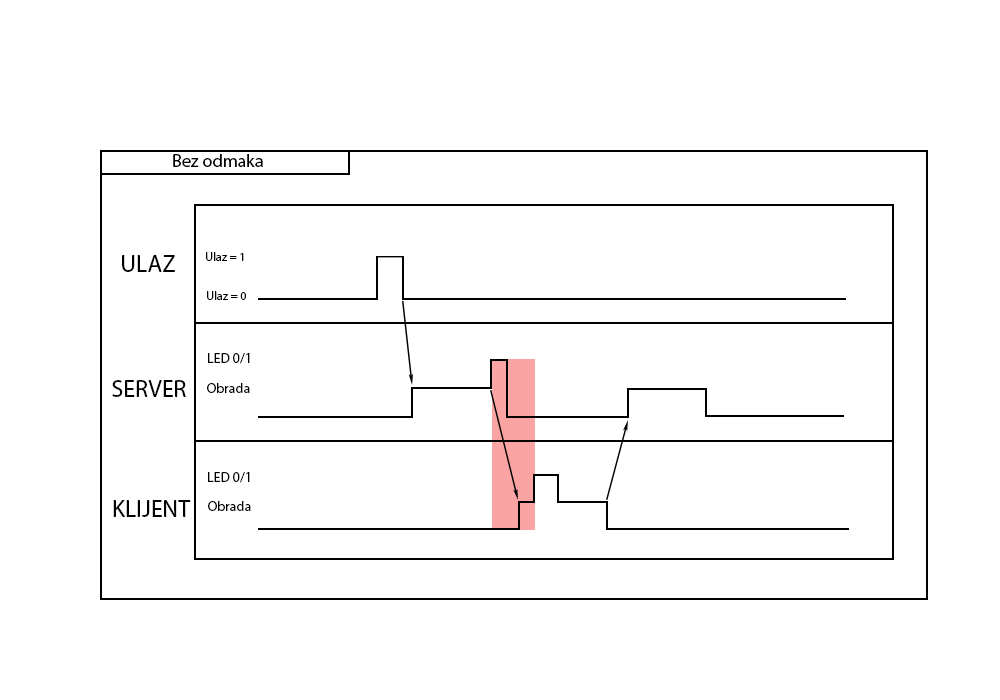
<style>
.page{position:relative;width:1000px;height:700px;background:#ffffff}
.page>*{position:absolute;margin:0}
.t1{font:18px "MyriadPro-Regular";color:#000000}
.t2{font:24px "MyriadPro-Regular";color:#000000}
.t3{font:12px "MyriadPro-Regular";color:#000000}
.t4{font:14px "MyriadPro-Regular";color:#000000}
</style>
<div class="page">
<p class="t1" style="left:173px;top:154px;width:90px;height:13px">Bez odmaka</p>
<p class="t2" style="left:122px;top:255px;width:53px;height:17px">ULAZ</p>
<p class="t3" style="left:206px;top:252px;width:38px;height:9px">Ulaz = 1</p>
<p class="t3" style="left:207px;top:291px;width:39px;height:9px">Ulaz = 0</p>
<p class="t4" style="left:208px;top:353px;width:42px;height:11px">LED 0/1</p>
<p class="t2" style="left:112px;top:380px;width:74px;height:17px">SERVER</p>
<p class="t4" style="left:207px;top:383px;width:43px;height:10px">Obrada</p>
<p class="t4" style="left:208px;top:472px;width:42px;height:11px">LED 0/1</p>
<p class="t2" style="left:113px;top:500px;width:78px;height:17px">KLIJENT</p>
<p class="t4" style="left:208px;top:501px;width:43px;height:10px">Obrada</p>
</div>
